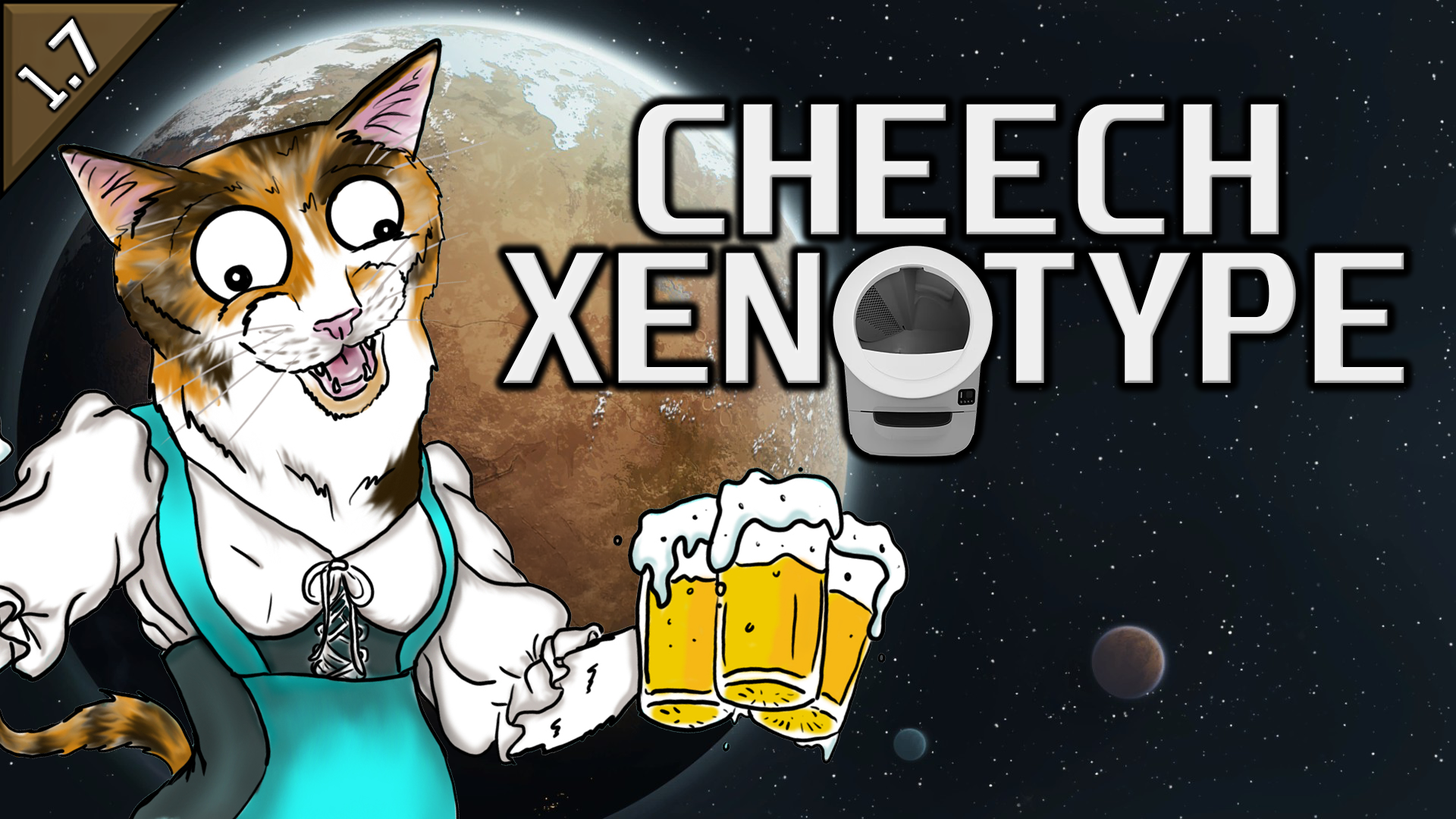
<style>
.page{position:relative;width:1456px;height:819px}
.page>*{position:absolute;margin:0}
.t1{font:61.8px "Unispace-Bold";letter-spacing:-0.06em;color:#ffffff;font-weight:bold;scale:0.6 1}
.t2{font:61.8px "Unispace-Bold";letter-spacing:-0.12em;color:#ffffff;font-weight:bold;scale:0.75 1}
.t3{font:61.8px "Unispace-Bold";letter-spacing:-0.12em;color:#ffffff;font-weight:bold}
.t4{font:160.9px/149px "Unispace-Bold";color:#e4e4e4;scale:1.12 1}
</style>
<div class="page">
<p class="t1" style="left:18px;top:18px;width:78px;height:92px;rotate:-46deg">1<span class="t2">.</span><span class="t3">7</span></p>
<p class="t4" style="left:503px;top:104px;width:901px;height:279px;text-align:center">CHEECH<br>XEN TYPE</p>
</div>
